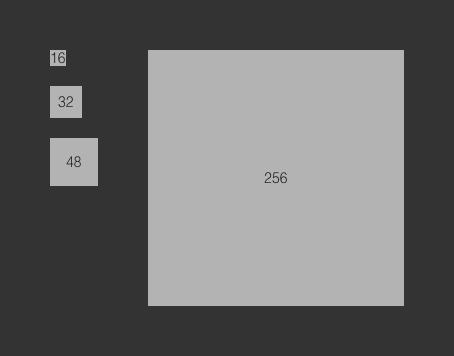
<style>
.page{position:relative;width:454px;height:356px;background:#333333}
.page>*{position:absolute;margin:0}
.t1{font:14px "Helvetica-Light";color:#242424}
</style>
<div class="page">
<p class="t1" style="left:51px;top:52px;width:14px;height:12px">16</p>
<p class="t1" style="left:58px;top:96px;width:15px;height:12px">32</p>
<p class="t1" style="left:66px;top:156px;width:15px;height:12px">48</p>
<p class="t1" style="left:264px;top:172px;width:23px;height:12px">256</p>
</div>
